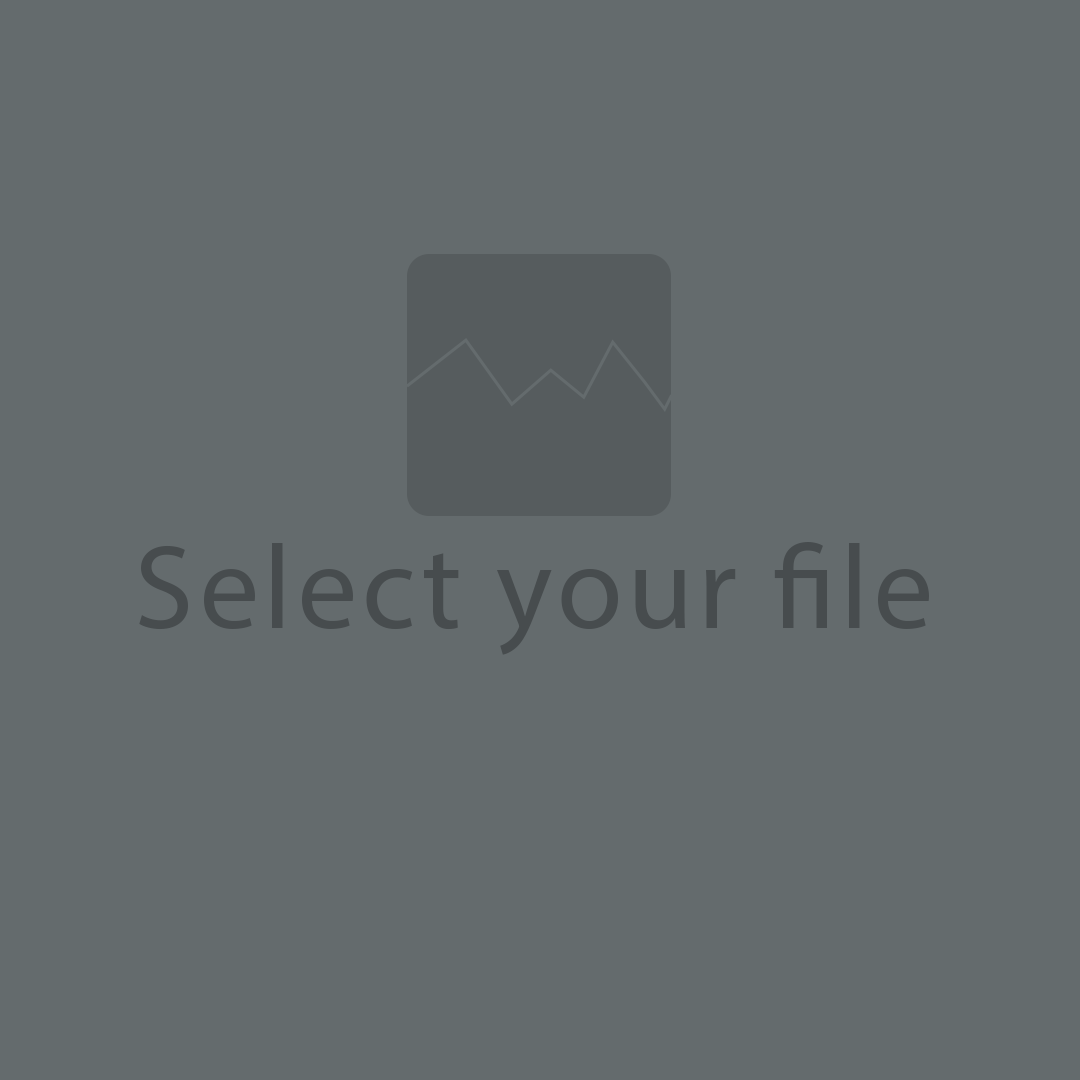
<style>
.page{position:relative;width:1080px;height:1080px;background:#646b6d}
.page>*{position:absolute;margin:0}
.t1{font:120px "MyriadPro-Regular";letter-spacing:0.04em;color:#474c4e}
</style>
<div class="page">
<p class="t1" style="left:139px;top:542px;width:790px;height:113px">Select your file</p>
</div>
